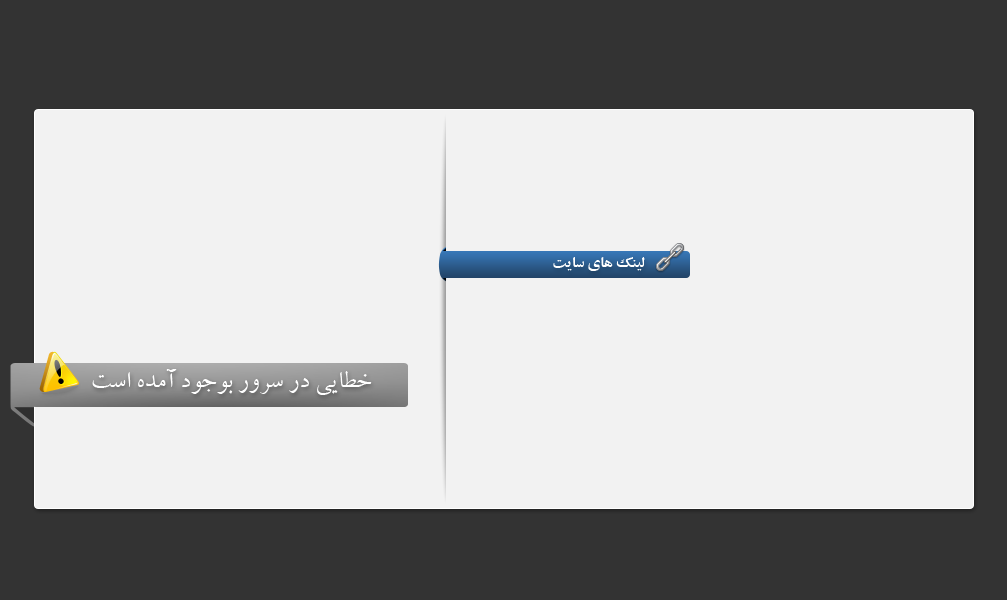
<style>
.page{position:relative;width:1007px;height:600px;background:#f2f2f2}
.page>*{position:absolute;margin:0}
.t1{font:16px "F_zar-Bold";color:#ffffff}
.t2{font:28px "F_zar";color:#ffffff}
</style>
<div class="page">
<p class="t1" style="left:553px;top:257px;width:92px;height:14px">SÄIw ÁIÀ ¦¹Ã²</p>
<p class="t2" style="left:92px;top:369px;width:280px;height:26px">SwH ½k¶A j¼]¼M n»ow nj ÂÄI‰i</p>
</div>
